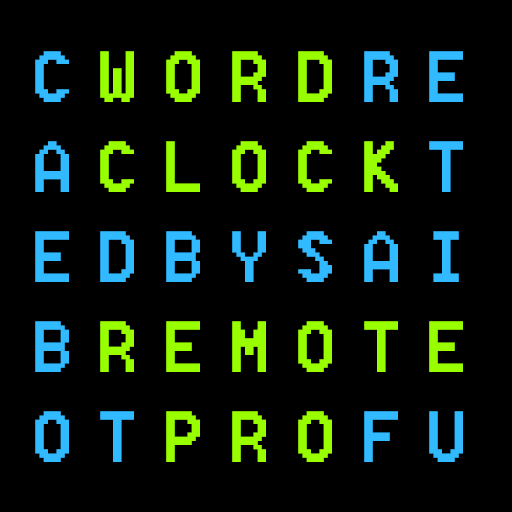
<style>
.page{position:relative;width:512px;height:512px;background:#000000}
.page>*{position:absolute;margin:0}
.t1{font:90px/90px "8514oem";letter-spacing:0.26em;color:#31baff;text-transform:uppercase}
.t2{font:90px/90px "8514oem";letter-spacing:0.26em;color:#99ff00;text-transform:uppercase}
</style>
<div class="page">
<p class="t1" style="left:35px;top:51px;width:428px;height:411px">C<span class="t2">wORD</span>re<br>a<span class="t2">CLOCK</span>t<br>edbysai<br>b<span class="t2">Remote<br></span>ot<span class="t2">pro</span>fu</p>
</div>
